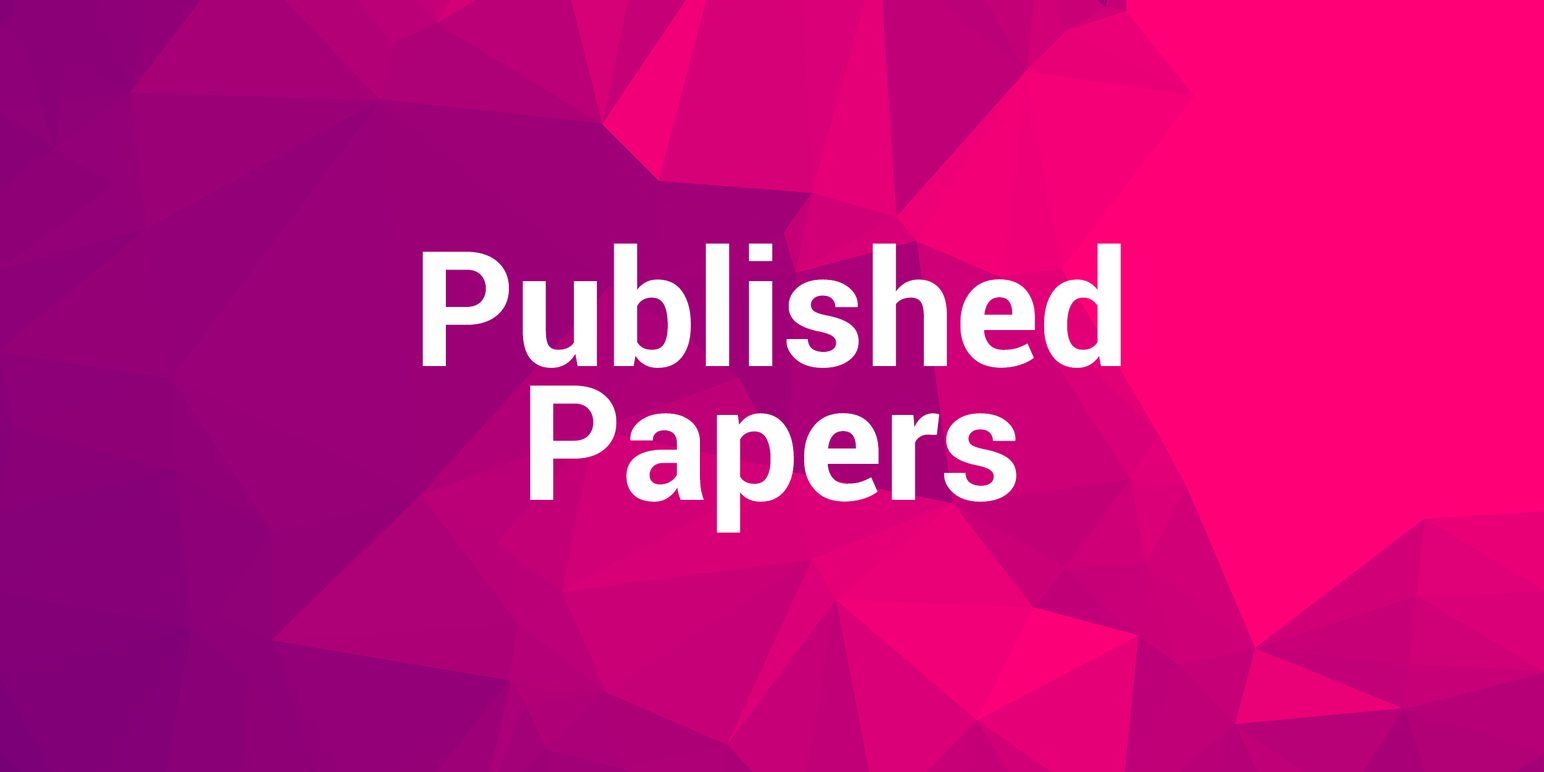
<style>
.page{position:relative;width:1544px;height:772px}
.page>*{position:absolute;margin:0}
.t1{font:160.5px/133.8px "Roboto-Bold";color:#ffffff}
</style>
<div class="page">
<p class="t1" style="left:423px;top:243px;width:698px;height:290px;text-align:center">Published<br>Papers</p>
</div>
